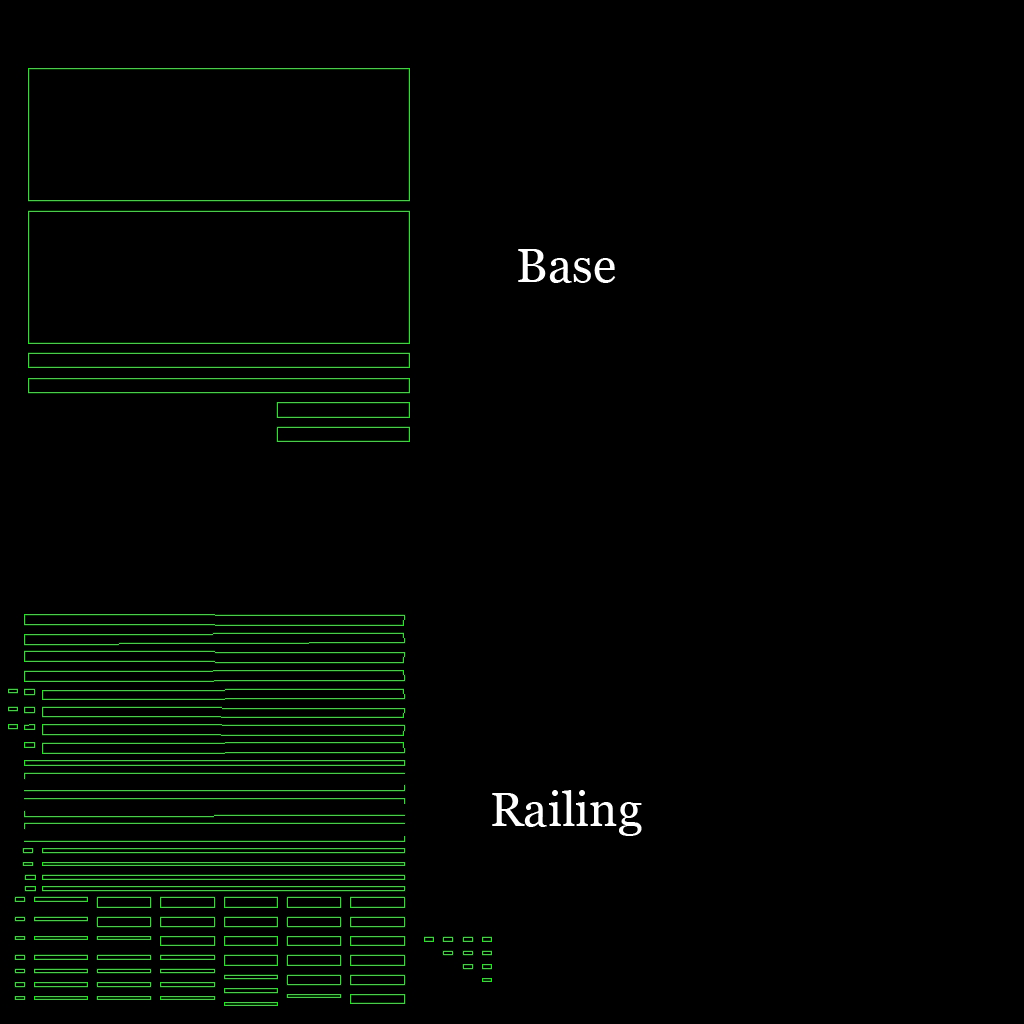
<style>
.page{position:relative;width:1024px;height:1024px;background:#000000}
.page>*{position:absolute;margin:0}
.t1{font:48px "Georgia";color:#ffffff}
</style>
<div class="page">
<p class="t1" style="left:518px;top:249px;width:98px;height:34px">Base</p>
<p class="t1" style="left:492px;top:790px;width:150px;height:46px">Railing</p>
</div>
